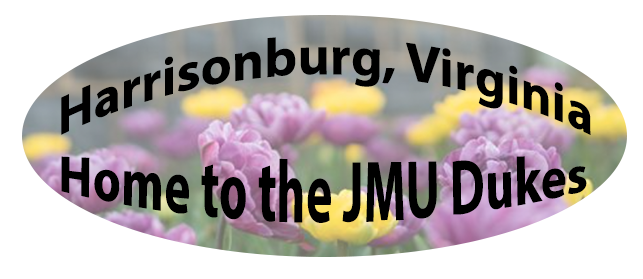
<style>
.page{position:relative;width:643px;height:279px;background:#ffffff}
.page>*{position:absolute;margin:0}
.t1{font:54.2px "MyriadPro-Bold";color:#000000}
.t2{font:50px "MyriadPro-Bold";color:#000000}
</style>
<div class="page">
<p class="t1" style="left:61px;top:37px;width:530px;height:98px">Harrisonburg, Virginia</p>
<p class="t2" style="left:61px;top:156px;width:526px;height:67px">Home to the JMU Dukes</p>
</div>
